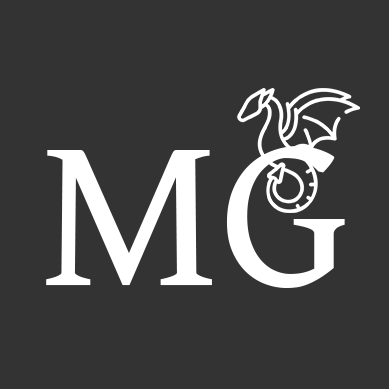
<style>
.page{position:relative;width:389px;height:389px;background:#333333}
.page>*{position:absolute;margin:0}
.t1{font:220px "GentiumBookBasic";color:#ffffff}
</style>
<div class="page">
<p class="t1" style="left:46px;top:146px;width:299px;height:142px">MG</p>
</div>
